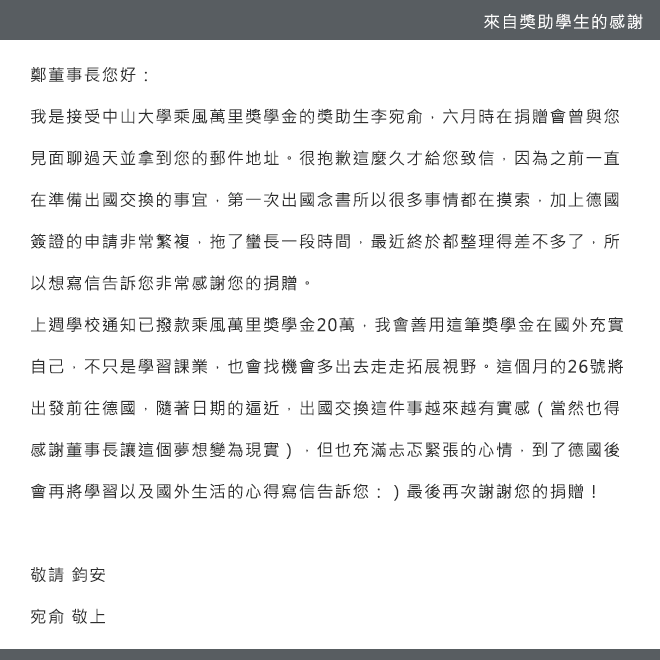
<style>
.page{position:relative;width:660px;height:660px;background:#ffffff}
.page>*{position:absolute;margin:0}
.t1{font:12px "MicrosoftJhengHeiRegular";letter-spacing:0.075em;color:#ffffff}
.t2{font:16.7px/41.7px "MicrosoftJhengHeiRegular";letter-spacing:0.075em;color:#2d2d2d}
</style>
<div class="page">
<p class="t1" style="left:484px;top:14px;width:159px;height:15px">來自獎助學生的感謝</p>
<p class="t2" style="left:31px;top:67px;width:592px;height:557px">鄭董事長您好：<br>我是接受中山大學乘風萬里獎學金的獎助生李宛俞，六月時在捐贈會曾與您<br>見面聊過天並拿到您的郵件地址。很抱歉這麼久才給您致信，因為之前一直<br>在準備出國交換的事宜，第一次出國念書所以很多事情都在摸索，加上德國<br>簽證的申請非常繁複，拖了蠻長一段時間，最近終於都整理得差不多了，所<br>以想寫信告訴您非常感謝您的捐贈。<br>上週學校通知已撥款乘風萬里獎學金20萬，我會善用這筆獎學金在國外充實<br>自己，不只是學習課業，也會找機會多出去走走拓展視野。這個月的26號將<br>出發前往德國，隨著日期的逼近，出國交換這件事越來越有實感（當然也得<br>感謝董事長讓這個夢想變為現實），但也充滿忐忑緊張的心情，到了德國後<br>會再將學習以及國外生活的心得寫信告訴您：）最後再次謝謝您的捐贈！<br><br>敬請 鈞安<br>宛俞 敬上</p>
</div>
